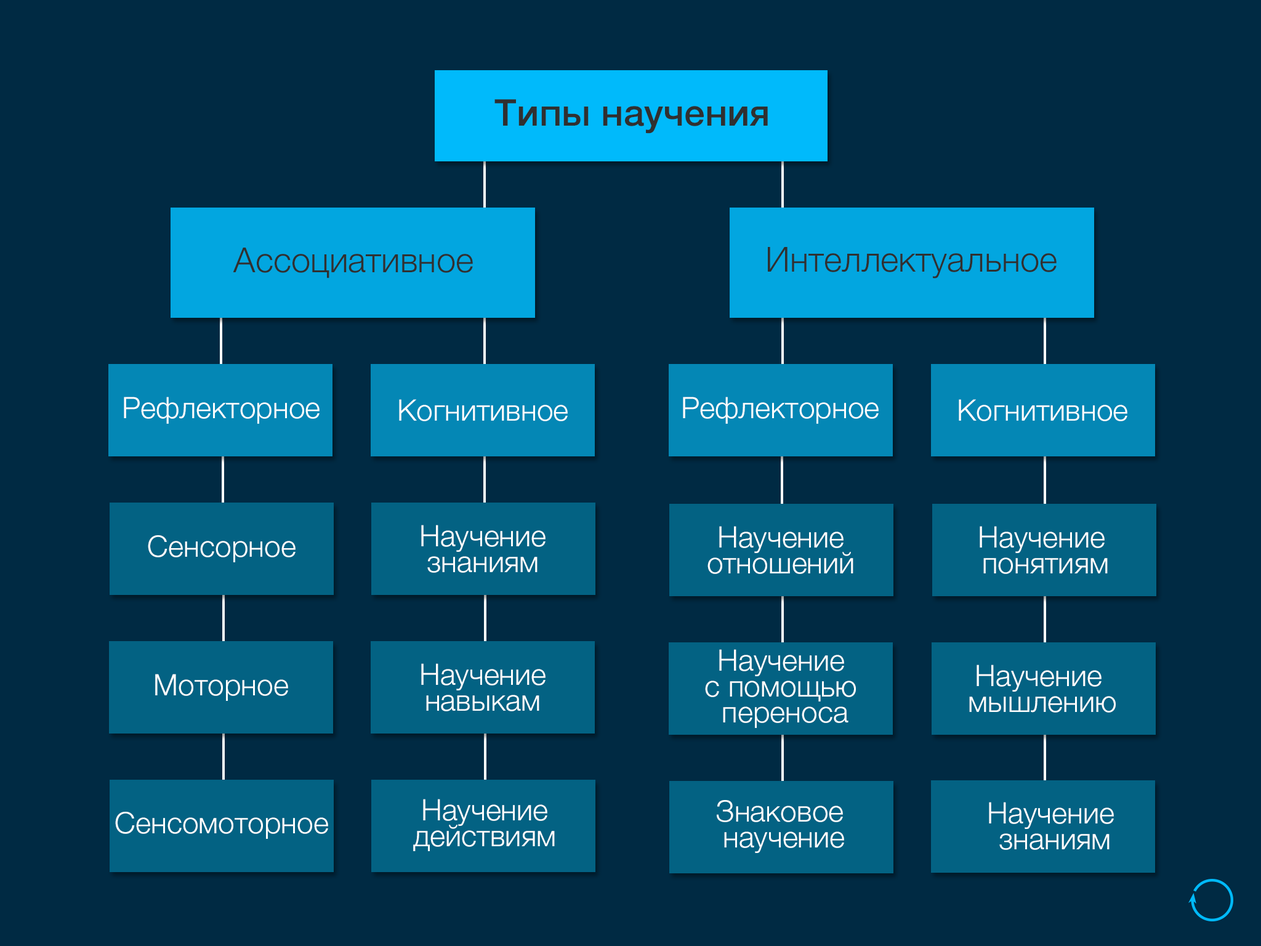
<style>
.page{position:relative;width:1261px;height:946px;background:#002a43}
.page>*{position:absolute;margin:0}
.t1{font:36.9px "HelveticaNeue-Medium";color:#303030}
.t2{font:34.5px "HelveticaNeue-Light";color:#303030}
.t3{font:29.6px "HelveticaNeue-Light";color:#ffffff}
.t4{font:29.6px/25.9px "HelveticaNeue-Light";color:#ffffff}
</style>
<div class="page">
<p class="t1" style="left:494px;top:99px;width:274px;height:35px">Типы научения</p>
<p class="t2" style="left:233px;top:248px;width:240px;height:30px">Ассоциативное</p>
<p class="t2" style="left:768px;top:247px;width:289px;height:31px">Интеллектуальное</p>
<p class="t3" style="left:124px;top:396px;width:196px;height:28px">Рефлекторное</p>
<p class="t3" style="left:399px;top:399px;width:169px;height:22px">Когнитивное</p>
<p class="t3" style="left:683px;top:396px;width:196px;height:28px">Рефлекторное</p>
<p class="t3" style="left:959px;top:399px;width:168px;height:22px">Когнитивное</p>
<p class="t4" style="left:421px;top:525px;width:124px;height:48px;text-align:center">Научение<br>знаниям</p>
<p class="t4" style="left:707px;top:526px;width:146px;height:48px;text-align:center">Научение<br>отношений</p>
<p class="t4" style="left:980px;top:526px;width:128px;height:48px;text-align:center">Научение <br>понятиям</p>
<p class="t3" style="left:148px;top:535px;width:148px;height:27px">Сенсорное</p>
<p class="t4" style="left:705px;top:649px;width:151px;height:79px;text-align:center">Научение <br>с помощью <br>переноса</p>
<p class="t4" style="left:421px;top:663px;width:124px;height:48px;text-align:center">Научение<br>навыкам</p>
<p class="t4" style="left:969px;top:664px;width:147px;height:48px;text-align:center">Научение <br>мышлению</p>
<p class="t3" style="left:155px;top:674px;width:133px;height:27px">Моторное</p>
<p class="t4" style="left:413px;top:799px;width:142px;height:52px;text-align:center">Научение<br>действиям</p>
<p class="t4" style="left:717px;top:800px;width:127px;height:53px;text-align:center">Знаковое <br>научение</p>
<p class="t4" style="left:989px;top:802px;width:125px;height:48px;text-align:center">Научение <br>знаниям</p>
<p class="t3" style="left:115px;top:811px;width:213px;height:28px">Сенсомоторное</p>
</div>
